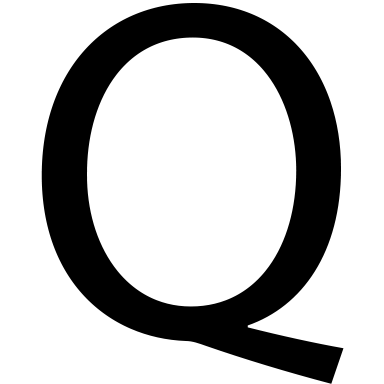
<style>
.page{position:relative;width:384px;height:384px;background:#ffffff}
.page>*{position:absolute;margin:0}
.t1{font:486.1px "MyriadPro-Regular";color:#000000}
</style>
<div class="page">
<p class="t1" style="left:41px;top:3px;width:303px;height:381px">Q</p>
</div>
